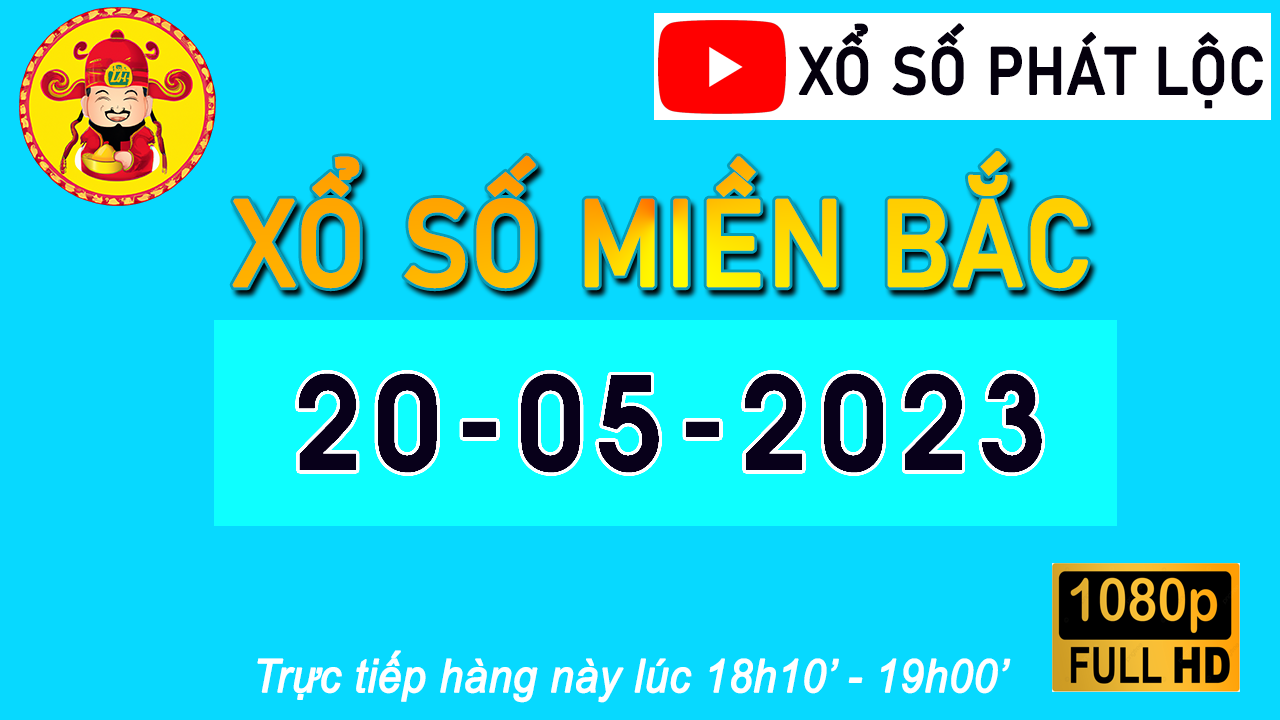
<style>
.page{position:relative;width:1280px;height:720px;background:#07d9ff}
.page>*{position:absolute;margin:0}
.t1{font:65.4px "Bahnschrift";color:#04000d;text-transform:uppercase;font-weight:bold;scale:0.92 1}
.t2{font:119.9px "Bahnschrift";text-transform:uppercase;font-weight:bold;scale:0.92 1}
.t3{font:45.8px "Arial-ItalicMT";color:#ffffff;font-weight:bold;scale:0.92 1}
</style>
<div class="page">
<p class="t1" style="left:798px;top:23px;width:465px;height:86px">Xổ số phát lộc</p>
<p class="t2" style="left:232px;top:151px;width:856px;height:138px">xổ số miền bắc</p>
<p class="t3" style="left:257px;top:650px;width:754px;height:53px">Trực tiếp hàng này lúc 18h10’ - 19h00’</p>
</div>
